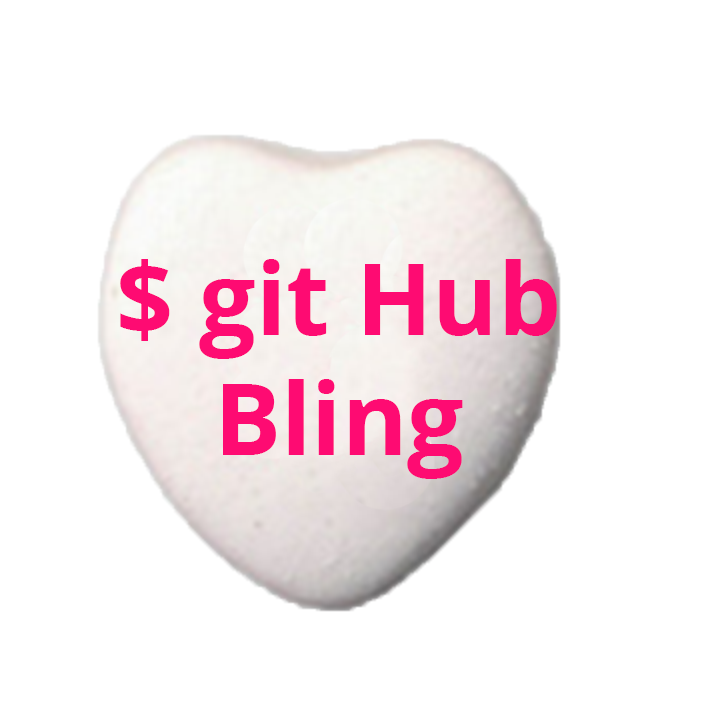
<style>
.page{position:relative;width:702px;height:708px;background:#ffffff}
.page>*{position:absolute;margin:0}
.t1{font:100px "OpenSans-Bold";color:#fe0b72}
</style>
<div class="page">
<p class="t1" style="left:120px;top:259px;width:437px;height:220px;text-align:center">$ git Hub<br>Bling</p>
</div>
